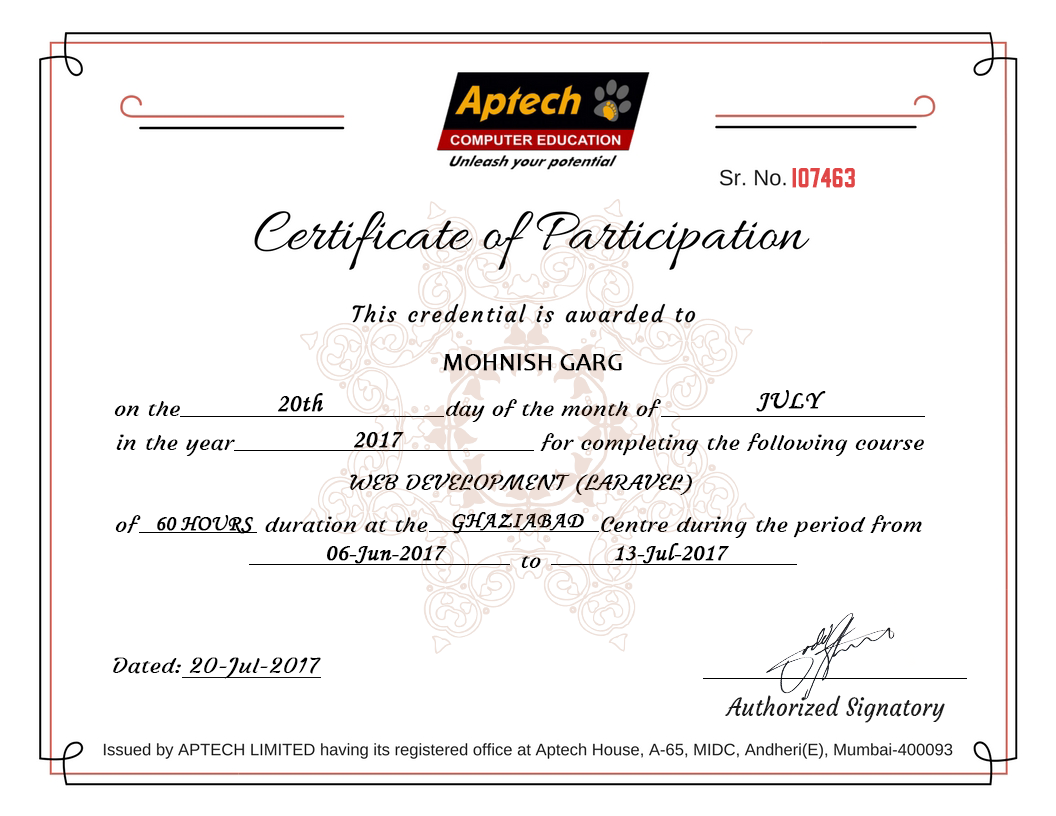
<style>
.page{position:relative;width:1056px;height:816px;background:#ffffff}
.page>*{position:absolute;margin:0}
.t1{font:27.4px "FeaturedItem";color:#e04646;font-weight:bold}
.t2{font:24.7px "Candara";color:#000000;font-weight:bold}
.t3{font:26.1px "MonotypeCorsiva";color:#000000;font-weight:bold}
.t4{font:21px "Courgette-Regular";color:#000000;scale:1.14 1}
.t5{font:20.9px "Courgette-Regular";color:#000000;scale:1.17 1}
.t6{font:22.1px "MonotypeCorsiva";color:#000000;font-weight:bold}
.t7{font:23.4px "MonotypeCorsiva";color:#000000;font-weight:bold}
.t8{font:24.7px "MonotypeCorsiva";color:#000000;font-weight:bold}
.t9{font:24.2px "Courgette-Regular";color:#191919}
</style>
<div class="page">
<p class="t1" style="left:792px;top:168px;width:63px;height:20px">107463</p>
<p class="t2" style="left:443px;top:354px;width:179px;height:17px">MOHNISH GARG</p>
<p class="t3" style="left:756px;top:390px;width:70px;height:22px">JULY</p>
<p class="t4" style="left:114px;top:399px;width:547px;height:23px">on the                                    day of the month of</p>
<p class="t3" style="left:278px;top:393px;width:45px;height:19px">20th</p>
<p class="t5" style="left:116px;top:433px;width:808px;height:23px">in the year                                         for completing the following course</p>
<p class="t3" style="left:354px;top:431px;width:50px;height:17px">2017</p>
<p class="t5" style="left:350px;top:473px;width:342px;height:22px">WEB DEVELOPMENT (LARAVEL)</p>
<p class="t5" style="left:115px;top:515px;width:807px;height:23px">of                 duration at the                       Centre during the period from</p>
<p class="t6" style="left:157px;top:515px;width:97px;height:19px">60 HOURS</p>
<p class="t7" style="left:452px;top:512px;width:132px;height:22px">GHAZIABAD</p>
<p class="t8" style="left:327px;top:545px;width:120px;height:19px">06-Jun-2017</p>
<p class="t8" style="left:615px;top:543px;width:114px;height:21px">13-Jul-2017</p>
<p class="t5" style="left:521px;top:556px;width:20px;height:12px">to</p>
<p class="t5" style="left:113px;top:657px;width:208px;height:22px">Dated: 20-Jul-2017</p>
<p class="t9" style="left:725px;top:695px;width:220px;height:28px">Authorized Signatory</p>
</div>
